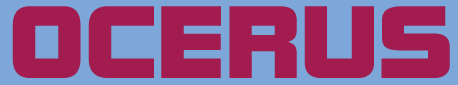
<style>
.page{position:relative;width:458px;height:85px;background:#a31c4f}
.page>*{position:absolute;margin:0}
.t1{font:96px "BoltBoldITCbyBT-Regular";color:#a31c4f}
</style>
<div class="page">
<p class="t1" style="left:12px;top:6px;width:438px;height:72px">OCERUS</p>
</div>
